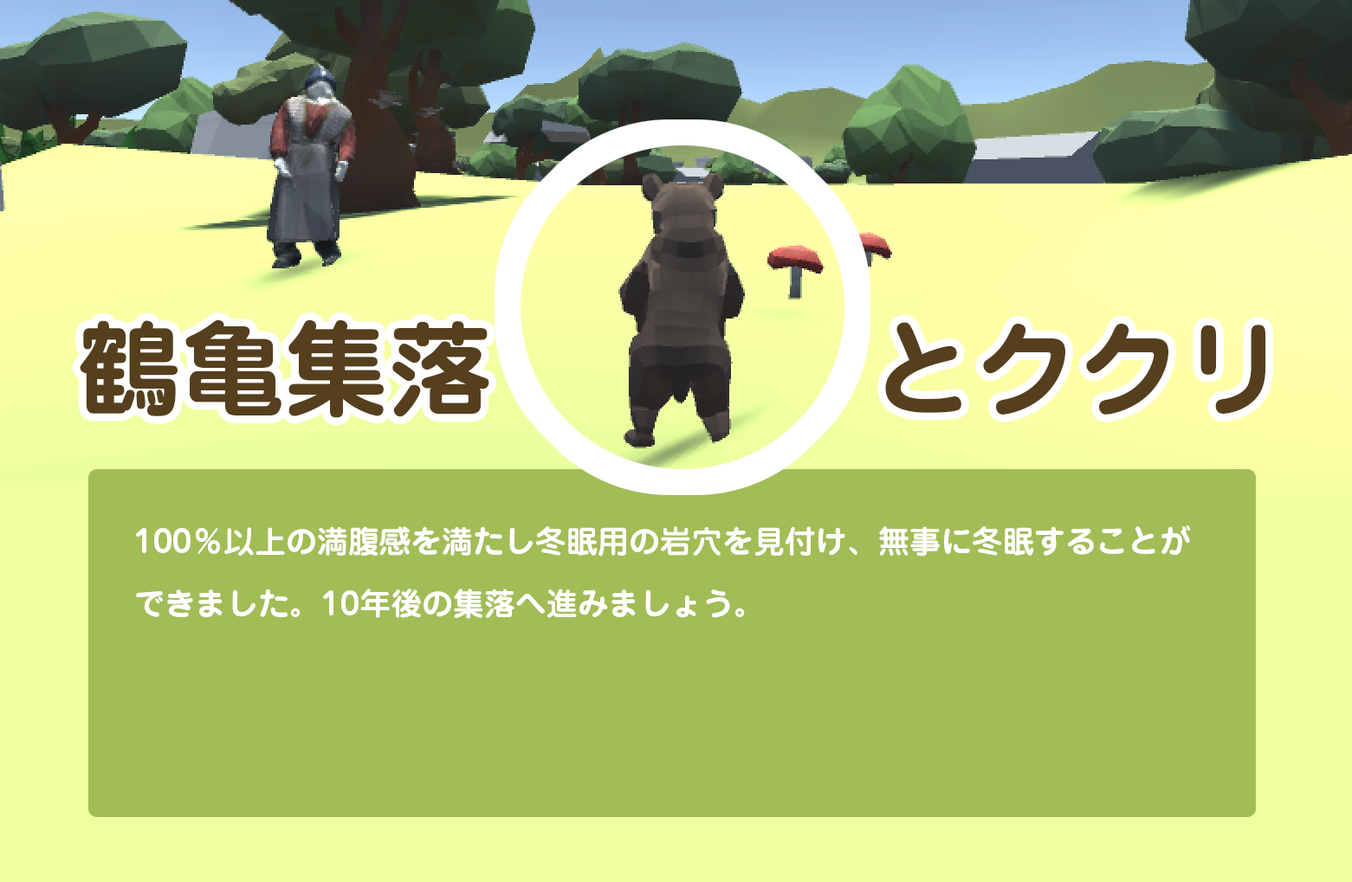
<style>
.page{position:relative;width:1352px;height:882px;background:#a2bc56}
.page>*{position:absolute;margin:0}
.t1{font:103.4px "Jun501Pro-Bold";color:#553f1d}
.t2{font:31.2px/62.3px "Jun501Pro-Bold";color:#ffffff}
</style>
<div class="page">
<p class="t1" style="left:80px;top:319px;width:1186px;height:99px">鶴亀集落     　　とククリ</p>
<p class="t2" style="left:136px;top:526px;width:1054px;height:93px">100％以上の満腹感を満たし冬眠用の岩穴を見付け、無事に冬眠することができました。10年後の集落へ進みましょう。</p>
</div>
